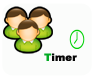
<style>
.page{position:relative;width:95px;height:79px;background:#fbfcfb}
.page>*{position:absolute;margin:0}
.t1{font:10px "Arial-Black";color:#060606;font-weight:bold}
.t2{font:10px "Arial-Black";color:#03ab24;font-weight:bold}
</style>
<div class="page">
<p class="t1" style="left:44px;top:53px;width:33px;height:8px"><span class="t2">T</span>imer</p>
</div>
